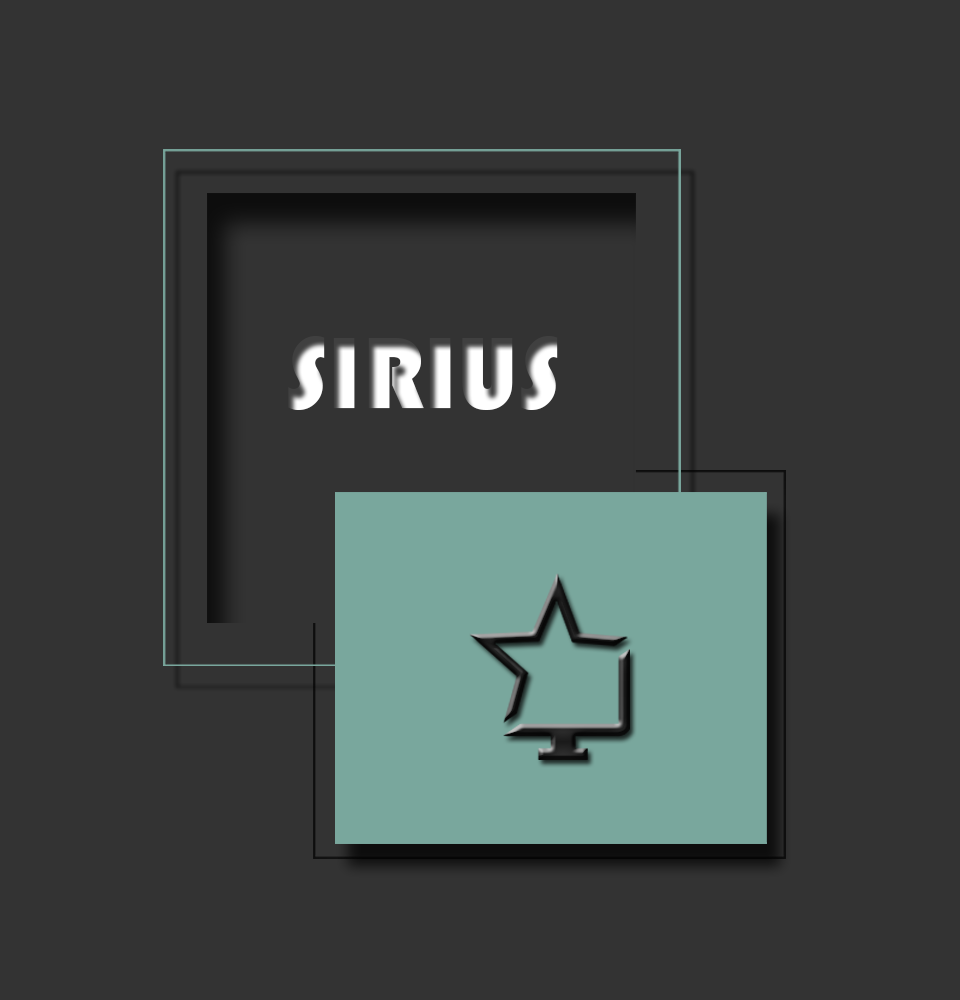
<style>
.page{position:relative;width:960px;height:1000px;background:#333333}
.page>*{position:absolute;margin:0}
.t1{font:104.8px "Bauhaus93"}
</style>
<div class="page">
<p class="t1" style="left:288px;top:336px;width:270px;height:74px">SIRIUS</p>
</div>
